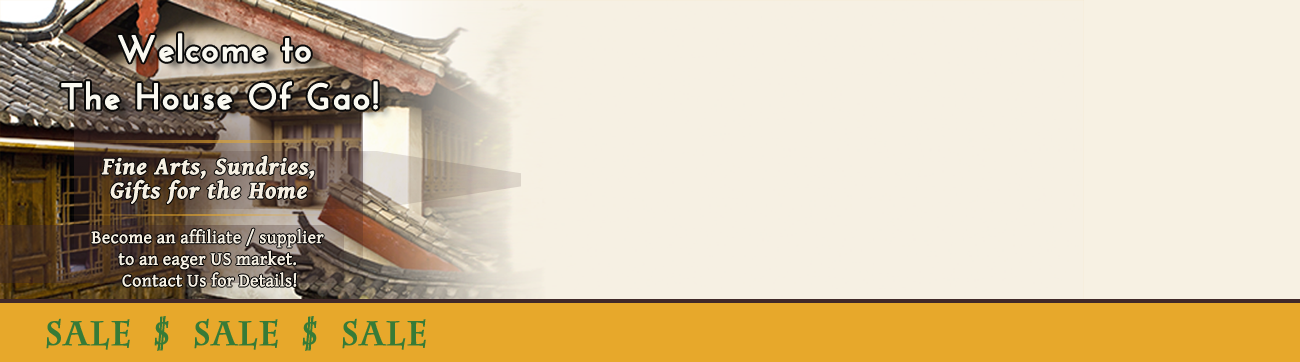
<style>
.page{position:relative;width:1300px;height:362px;background:#f6f0e3}
.page>*{position:absolute;margin:0}
.t1{font:36px/48px "JosefinSans-Bold";letter-spacing:0.025em;color:#faf9f1;font-weight:bold}
.t2{font:24px/24px "GentiumBasic-BoldItalic";letter-spacing:0.025em;color:#f6f0e3;font-weight:bold}
.t3{font:18px "GentiumBasic";color:#f6f0e3;font-weight:bold}
.t4{font:33px "CharlemagneStd-Bold";letter-spacing:0.025em;color:#377b37;font-weight:bold}
</style>
<div class="page">
<p class="t1" style="left:61px;top:33px;width:317px;height:77px;text-align:center">Welcome to <br>The House Of Gao!</p>
<p class="t2" style="left:101px;top:155px;width:214px;height:49px;text-align:center">Fine Arts, Sundries,<br>Gifts for the Home</p>
<p class="t3" style="left:91px;top:228px;width:233px;height:59px;text-align:center">Become an affiliate / supplier <br>to an eager US market. <br>Contact Us for Details!</p>
<p class="t4" style="left:46px;top:316px;width:380px;height:35px">Sale  $  Sale  $  Sale</p>
</div>
